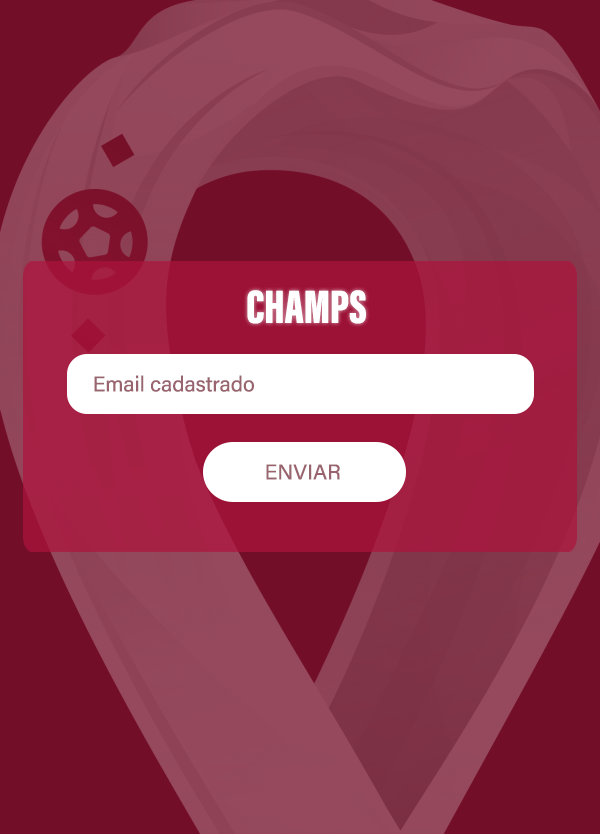
<style>
.page{position:relative;width:600px;height:834px;background:#730e29}
.page>*{position:absolute;margin:0}
.t1{font:48.2px "AcuminConcept-ExtraCondensedBlack";color:#ffffff}
.t2{font:21.4px "AcuminConcept-Regular";color:#99646e}
</style>
<div class="page">
<p class="t1" style="left:247px;top:290px;width:119px;height:34px">CHAMPS</p>
<p class="t2" style="left:94px;top:375px;width:160px;height:17px">Email cadastrado</p>
<p class="t2" style="left:266px;top:464px;width:74px;height:16px">ENVIAR</p>
</div>
